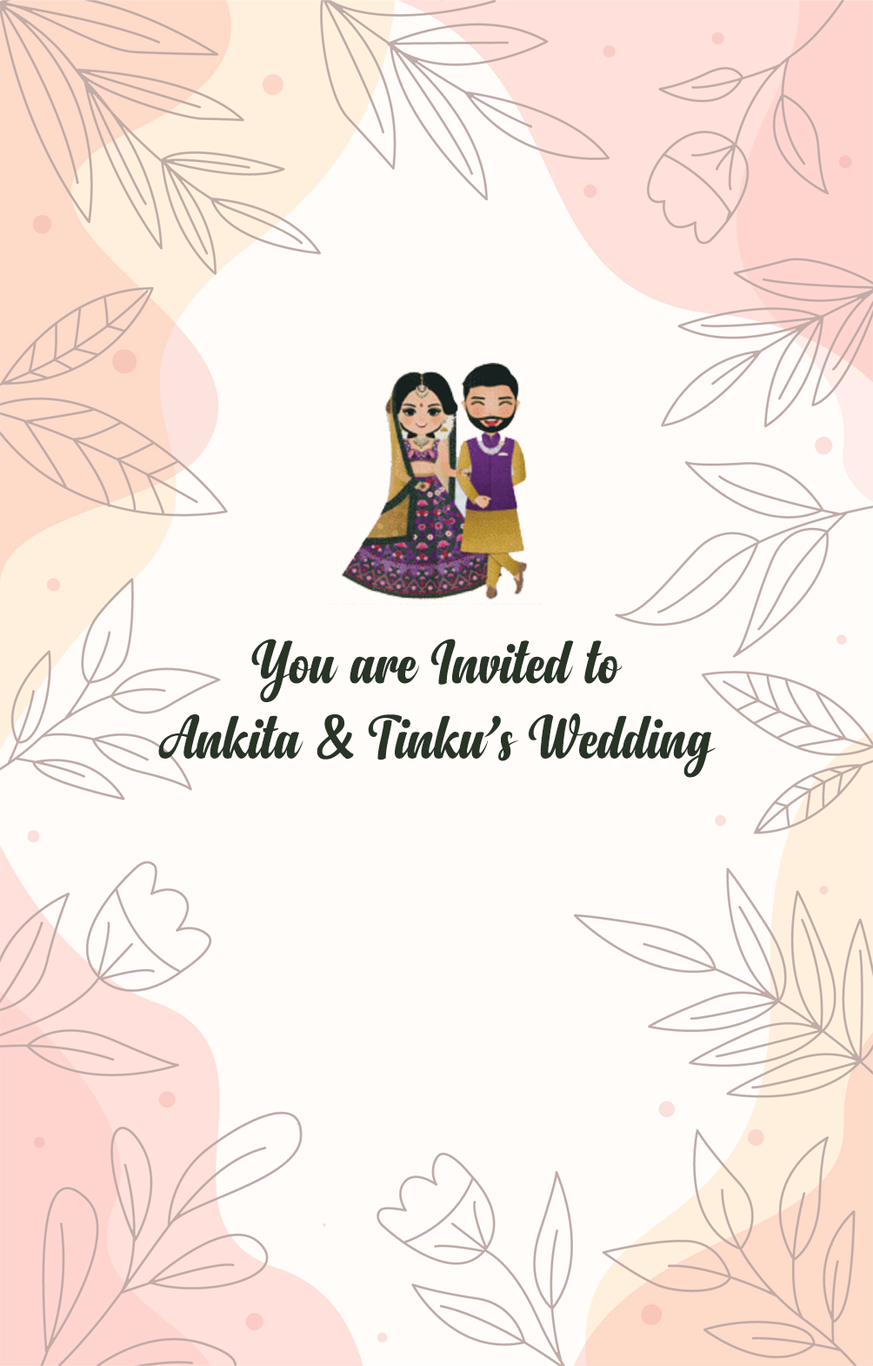
<style>
.page{position:relative;width:873px;height:1366px;background:#fffcfa}
.page>*{position:absolute;margin:0}
.t1{font:62.6px "Anydore";color:#283426}
</style>
<div class="page">
<p class="t1" style="left:158px;top:638px;width:558px;height:140px;text-align:center">You are Invited to<br>Ankita &amp; Tinku’s Wedding</p>
</div>
